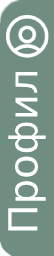
<style>
.page{position:relative;width:54px;height:256px;background:#708d81}
.page>*{position:absolute;margin:0}
.t1{font:40px "DejaVuSans";color:#ffffff}
</style>
<div class="page">
<p class="t1" style="left:8px;top:72px;width:38px;height:159px;rotate:-90deg">Профил</p>
</div>
